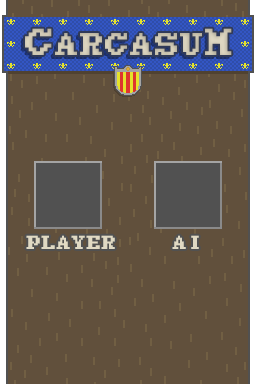
<style>
.page{position:relative;width:256px;height:384px;background:#61503c}
.page>*{position:absolute;margin:0}
.t1{font:50px "7:12-Serif-Bold";color:#cec7b3}
.t2{font:60px "7:12-Serif-Bold";color:#cec7b3}
.t3{font:30px "7:12-Serif-Bold";color:#e0d9c3}
</style>
<div class="page">
<p class="t1" style="left:25px;top:28px;width:207px;height:27px"><span class="t2">C</span>ARCASU<span class="t2">M</span></p>
<p class="t3" style="left:26px;top:235px;width:89px;height:14px">PLAYER</p>
<p class="t3" style="left:172px;top:235px;width:27px;height:14px">AI</p>
</div>
